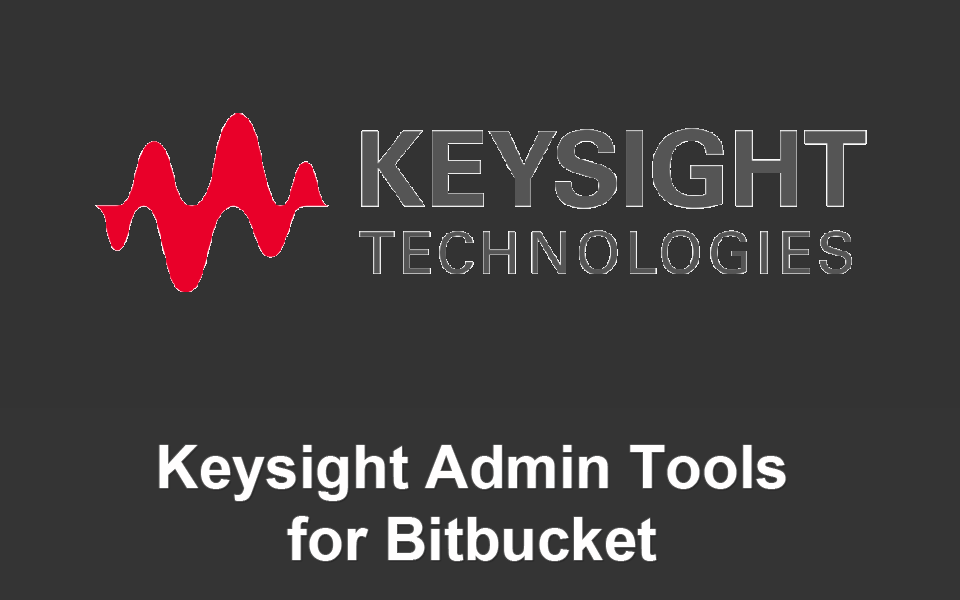
<style>
.page{position:relative;width:960px;height:600px;background:#333333}
.page>*{position:absolute;margin:0}
.t1{font:60px "Arial-BoldMT";color:#fffefe}
</style>
<div class="page">
<p class="t1" style="left:159px;top:445px;width:627px;height:116px;text-align:center">Keysight Admin Tools<br>for Bitbucket</p>
</div>
